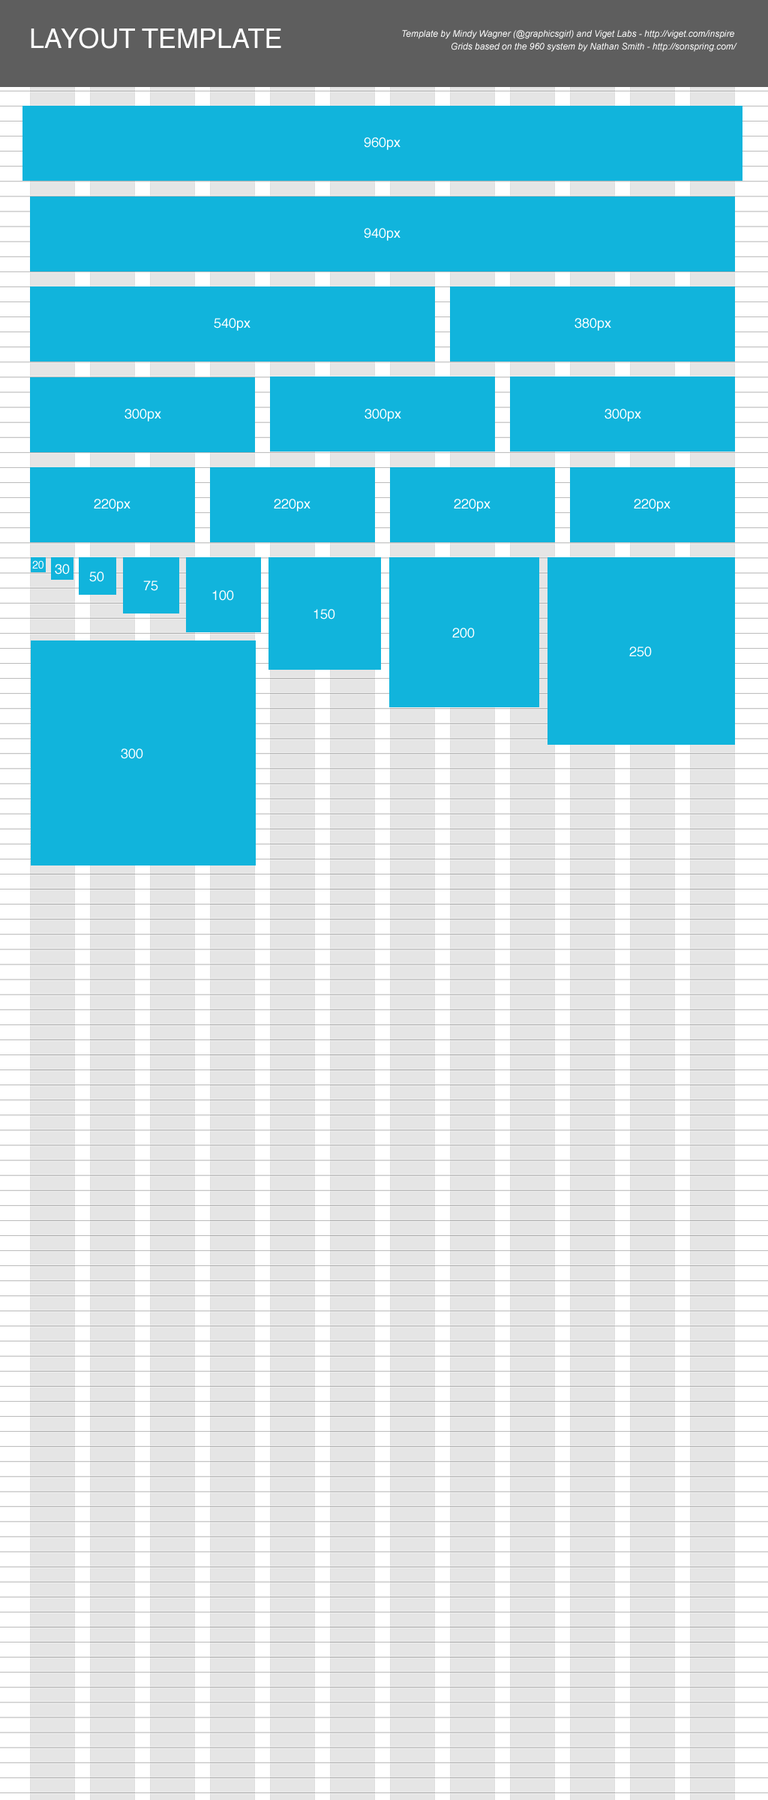
<style>
.page{position:relative;width:768px;height:1800px;background:#11b4dc}
.page>*{position:absolute;margin:0}
.t1{font:27px "Helvetica";color:#ffffff}
.t2{font:9px "Arial-ItalicMT";color:#ffffff}
</style>
<div class="page">
<p class="t1" style="left:31px;top:28px;width:250px;height:21px">LAYOUT TEMPLATE</p>
<p class="t2" style="left:402px;top:30px;width:332px;height:9px">Template by Mindy Wagner (@graphicsgirl) and Viget Labs - http://viget.com/inspire</p>
<p class="t2" style="left:452px;top:43px;width:285px;height:9px">Grids based on the 960 system by Nathan Smith - http://sonspring.com/</p>
</div>
